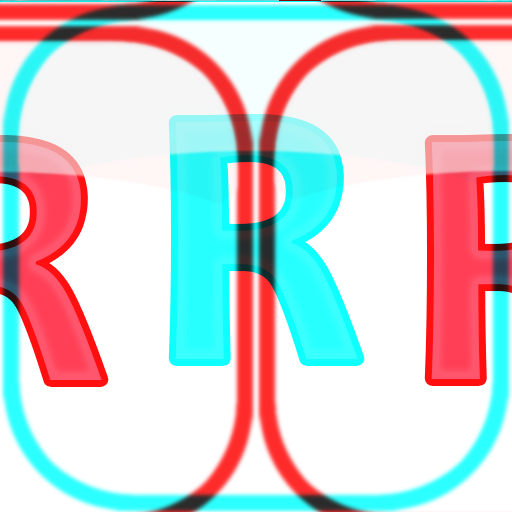
<style>
.page{position:relative;width:512px;height:512px;background:#ffffff}
.page>*{position:absolute;margin:0}
.t1{font:374.2px "Candara-Bold";color:#32ffff;scale:0.94 1}
</style>
<div class="page">
<p class="t1" style="left:175px;top:119px;width:183px;height:238px">R</p>
</div>
